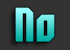
<style>
.page{position:relative;width:70px;height:50px;background:#333333}
.page>*{position:absolute;margin:0}
.t1{font:47.9px "Whitestone-Bold"}
</style>
<div class="page">
<p class="t1" style="left:15px;top:7px;width:40px;height:35px">No</p>
</div>
